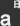
<style>
.page{position:relative;width:20px;height:26px;background:#333333}
.page>*{position:absolute;margin:0}
.t1{font:12px "DFKaiShu-SB-Estd-BF";color:#ececec;font-weight:bold}
.t2{font:20px "ArialMT";color:#ececec;font-weight:bold}
</style>
<div class="page">
<p class="t1" style="left:14px;top:0px;width:7px;height:9px">日</p>
<p class="t2" style="left:0px;top:14px;width:11px;height:12px">a</p>
</div>
